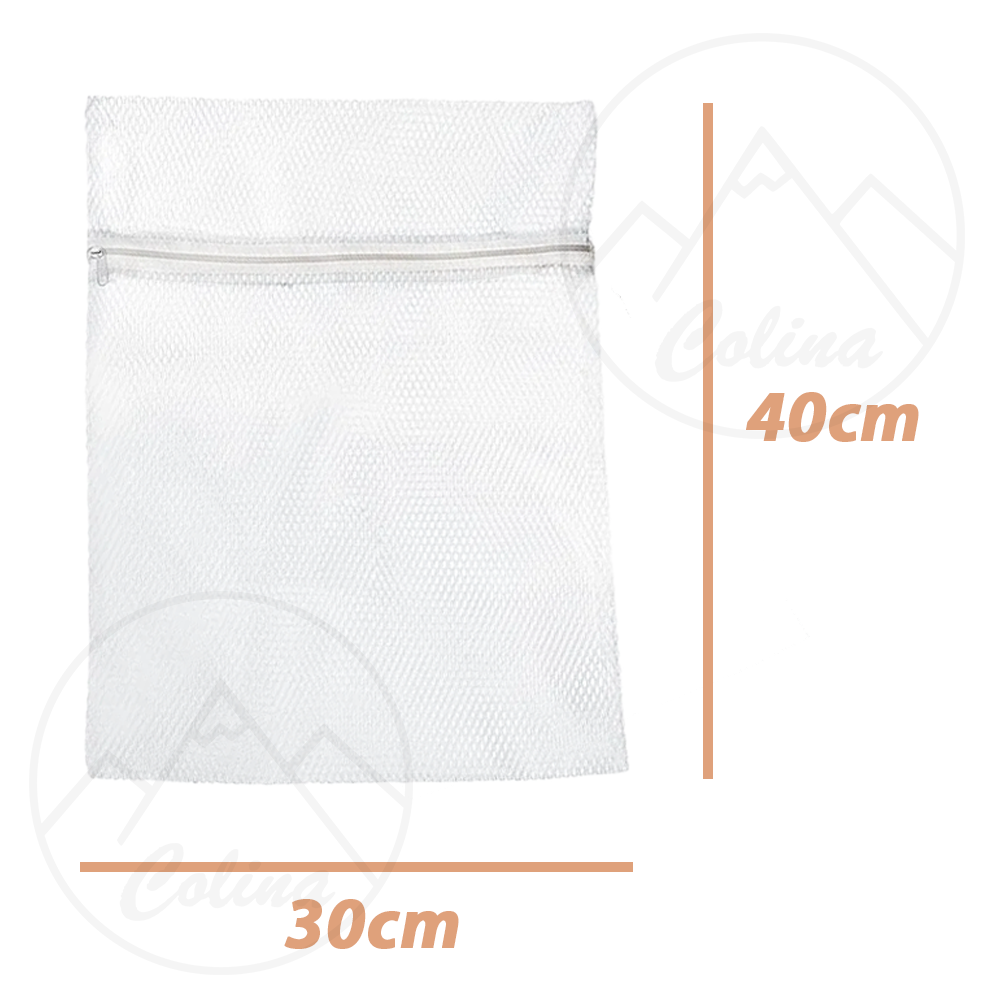
<style>
.page{position:relative;width:1000px;height:1000px;background:#ffffff}
.page>*{position:absolute;margin:0}
.t1{font:72px "MyriadPro-BoldIt";color:#dfa17b;font-weight:bold}
</style>
<div class="page">
<p class="t1" style="left:746px;top:392px;width:173px;height:50px">40cm</p>
<p class="t1" style="left:284px;top:899px;width:175px;height:50px">30cm</p>
</div>
